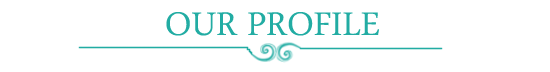
<style>
.page{position:relative;width:550px;height:72px;background:#ffffff}
.page>*{position:absolute;margin:0}
.t1{font:48px "ArabicTypesetting";color:#22aca3}
</style>
<div class="page">
<p class="t1" style="left:166px;top:12px;width:213px;height:24px">OUR PROFILE</p>
</div>
